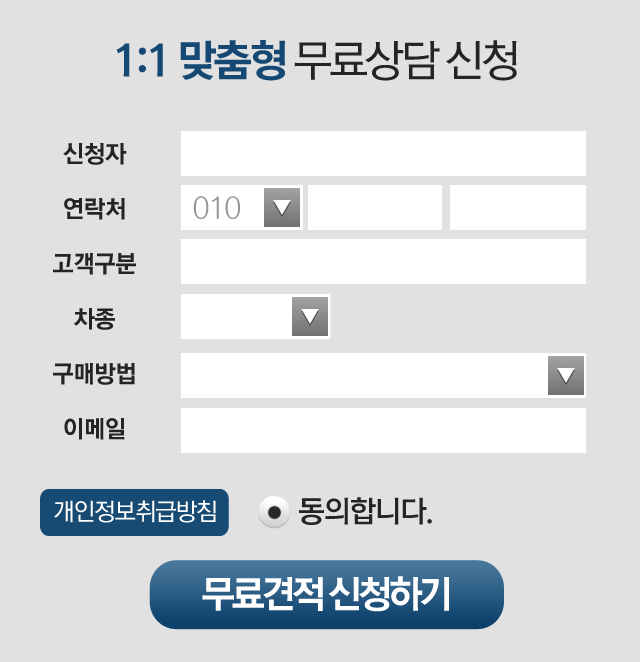
<style>
.page{position:relative;width:640px;height:662px;background:#e1e1e1}
.page>*{position:absolute;margin:0}
.t1{font:43.5px "RixMGoEB";letter-spacing:-0.075em;color:#154973}
.t2{font:43.5px "RixMGoM";letter-spacing:-0.075em;color:#242424}
.t3{font:24px/55px "RixMGoEB";letter-spacing:-0.025em;color:#242424}
.t4{font:30px "RixMGoL";letter-spacing:-0.075em;color:#959595}
.t5{font:30px "RixMGoB";letter-spacing:-0.05em;color:#242424}
.t6{font:24px "RixMGoM";letter-spacing:-0.05em;color:#ffffff}
.t7{font:37.7px "RixMGoEB";letter-spacing:-0.1em;color:#ffffff}
</style>
<div class="page">
<p class="t1" style="left:116px;top:40px;width:401px;height:41px">1:1 맞춤형 <span class="t2">무료상담 신청</span></p>
<p class="t3" style="left:53px;top:143px;width:83px;height:297px;text-align:center">신청자<br>연락처<br>고객구분<br>차종<br>구매방법<br>이메일</p>
<p class="t4" style="left:193px;top:196px;width:47px;height:23px">010</p>
<p class="t5" style="left:299px;top:497px;width:133px;height:28px">동의합니다.</p>
<p class="t6" style="left:54px;top:500px;width:162px;height:23px">개인정보취급방침</p>
<p class="t7" style="left:202px;top:576px;width:247px;height:36px">무료견적 신청하기</p>
</div>
